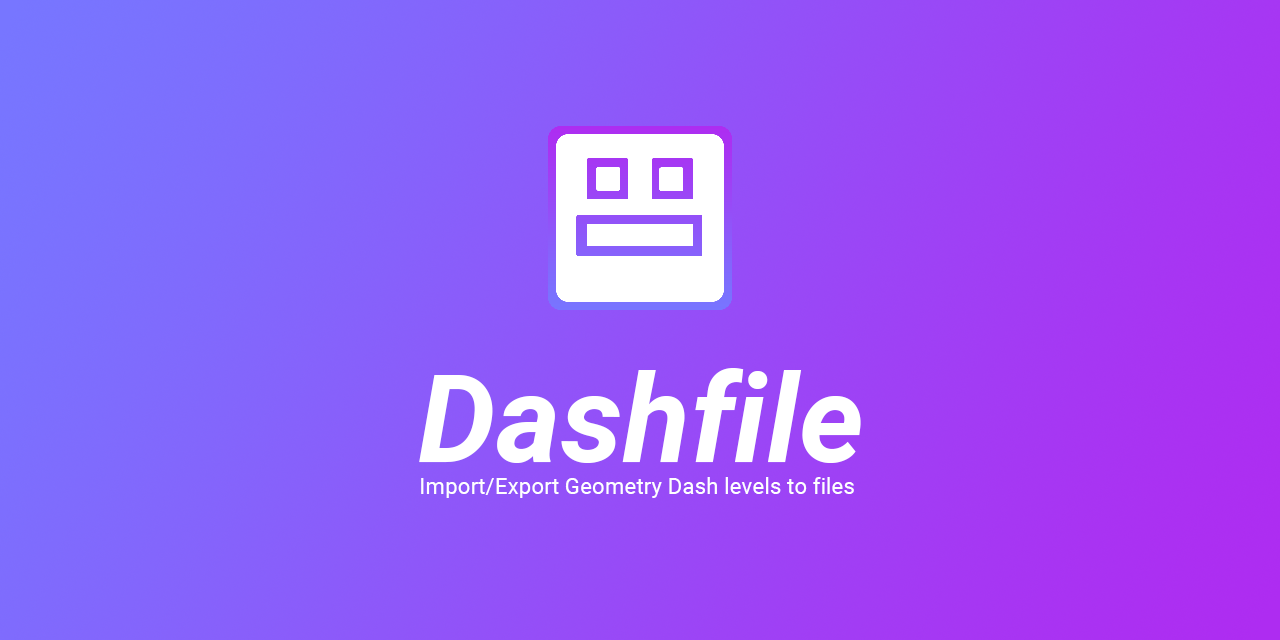
<style>
.page{position:relative;width:1280px;height:640px}
.page>*{position:absolute;margin:0}
.t1{font:123.5px "Roboto-BoldItalic";color:#ffffff}
.t2{font:22.5px "Roboto-Regular";color:#ffffff}
</style>
<div class="page">
<p class="t1" style="left:419px;top:368px;width:442px;height:95px">Dashfile</p>
<p class="t2" style="left:421px;top:477px;width:433px;height:21px">Import/Export Geometry Dash levels to files</p>
</div>
